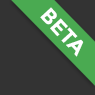
<style>
.page{position:relative;width:95px;height:95px;background:#333333}
.page>*{position:absolute;margin:0}
.t1{font:21px "Montserrat-Bold";color:#ffffff}
</style>
<div class="page">
<p class="t1" style="left:40px;top:7px;width:44px;height:50px;rotate:47deg">BETA</p>
</div>
